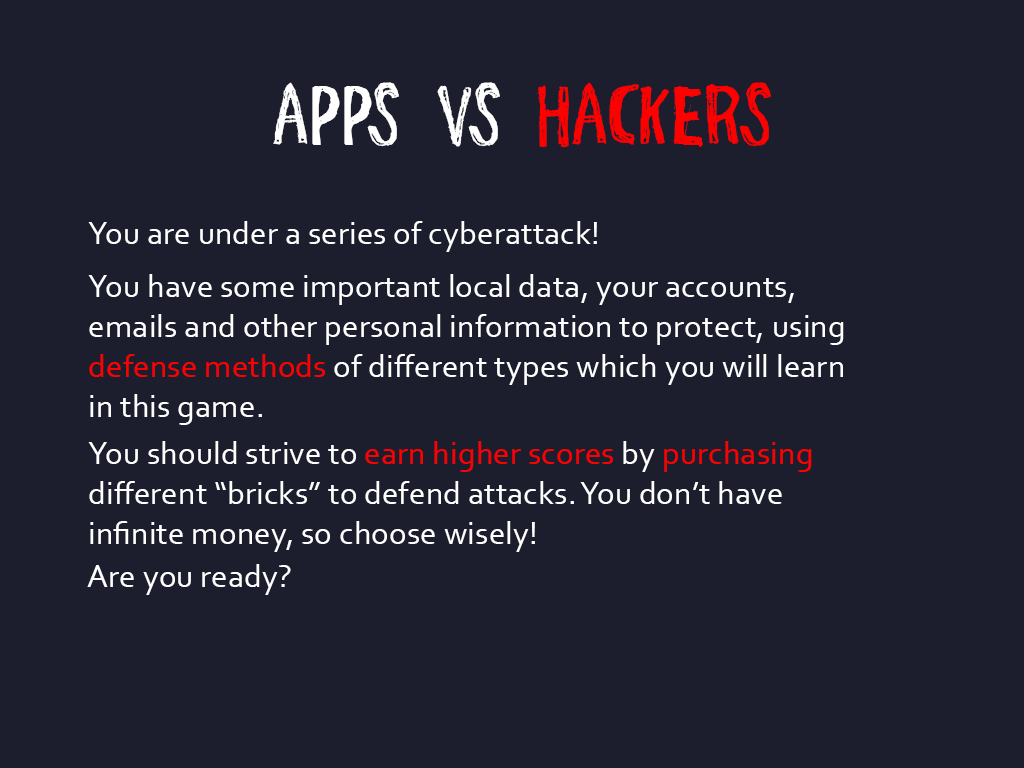
<style>
.page{position:relative;width:1024px;height:768px;background:#1c1e2d}
.page>*{position:absolute;margin:0}
.t1{font:66.7px "JumpStart";color:#ffffff}
.t2{font:66.7px "JumpStart";color:#ff0000}
.t3{font:33.3px "Corbel";color:#ffffff}
.t4{font:33.3px "Corbel";color:#ff0000}
</style>
<div class="page">
<p class="t1" style="left:273px;top:82px;width:498px;height:66px">APPS VS <span class="t2">HACKERS</span></p>
<p class="t3" style="left:88px;top:221px;width:509px;height:31px">You are under a series of cyberattack!</p>
<p class="t3" style="left:88px;top:274px;width:756px;height:151px">You have some important local data, your accounts, emails and other personal information to protect, using <span class="t4">defense methods</span> of different types which you will learn in this game.</p>
<p class="t3" style="left:88px;top:441px;width:724px;height:111px">You should strive to <span class="t4">earn higher scores</span> by <span class="t4">purchasing </span>different “bricks” to defend attacks. You don’t have infinite money, so choose wisely!</p>
<p class="t3" style="left:87px;top:564px;width:204px;height:31px">Are you ready?</p>
</div>
